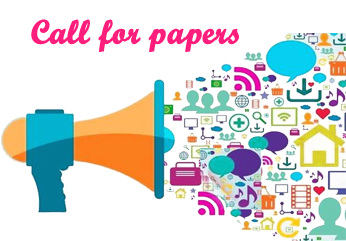
<style>
.page{position:relative;width:346px;height:241px;background:#ffffff}
.page>*{position:absolute;margin:0}
.t1{font:33.3px "ScriptMTBold";color:#ff1e7b;font-weight:bold;scale:0.97 1}
</style>
<div class="page">
<p class="t1" style="left:31px;top:19px;width:208px;height:33px">Call for papers</p>
</div>
